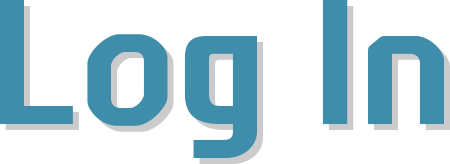
<style>
.page{position:relative;width:450px;height:164px;background:#ffffff}
.page>*{position:absolute;margin:0}
.t1{font:170.8px "NEXONFootballGothicB";color:#3d8dab}
</style>
<div class="page">
<p class="t1" style="left:0px;top:0px;width:444px;height:158px">Log In</p>
</div>
